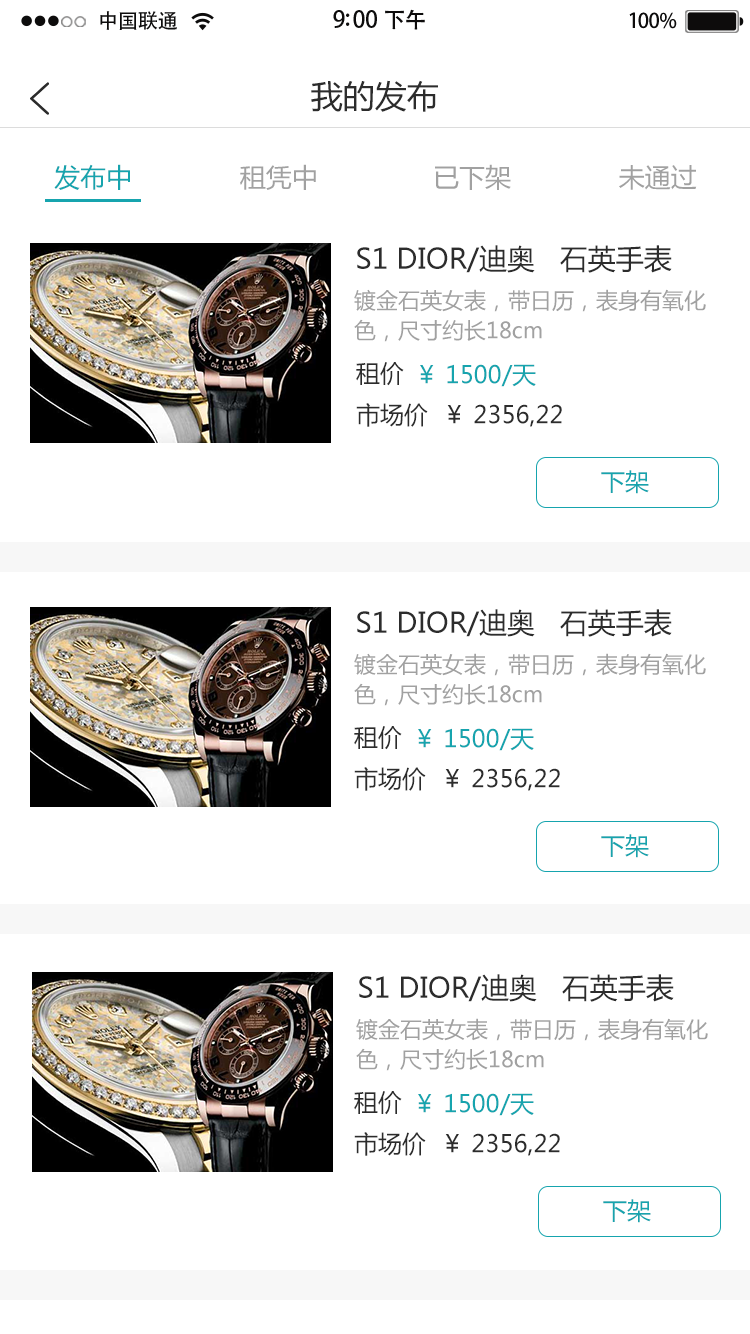
<style>
.page{position:relative;width:750px;height:1334px;background:#ffffff}
.page>*{position:absolute;margin:0}
.t1{font:20.4px "AdobeHeitiStd-Regular";letter-spacing:-0.02em;color:#000000}
.t2{font:23px "AdobeHeitiStd-Regular";letter-spacing:-0.02em;color:#000000}
.t3{font:22px "AdobeHeitiStd-Regular";letter-spacing:-0.02em;color:#000000}
.t4{font:20.4px "AdobeHeitiStd-Regular";letter-spacing:-0.02em;color:#010101}
.t5{font:32px "MicrosoftYaHei";color:#2c2c2c}
.t6{font:26px "MicrosoftYaHei";color:#a1a1a1}
.t7{font:26px "MicrosoftYaHei";color:#16a4ae}
.t8{font:28px "MicrosoftYaHei";color:#2c2c2c}
.t9{font:22px/15px "MicrosoftYaHei";color:#a1a1a1}
.t10{font:24px "MicrosoftYaHei";color:#2c2c2c}
.t11{font:24px "MicrosoftYaHei";color:#16a4ae}
</style>
<div class="page">
<p class="t1" style="left:100px;top:11px;width:77px;height:19px">中国联通</p>
<p class="t2" style="left:333px;top:9px;width:92px;height:21px">9:00 <span class="t3">下午</span></p>
<p class="t4" style="left:629px;top:12px;width:48px;height:17px">100%</p>
<p class="t5" style="left:311px;top:80px;width:127px;height:32px">我的发布</p>
<p class="t6" style="left:54px;top:164px;width:643px;height:26px"><span class="t7">发布中              </span>租凭中               已下架              未通过</p>
<p class="t8" style="left:357px;top:245px;width:315px;height:28px">S1 DIOR/迪奥   石英手表</p>
<p class="t9" style="left:354px;top:289px;width:352px;height:53px">镀金石英女表，带日历，表身有氧化<br><br>色，尺寸约长18cm</p>
<p class="t10" style="left:356px;top:362px;width:48px;height:24px">租价</p>
<p class="t11" style="left:420px;top:364px;width:116px;height:23px">￥ 1500/天</p>
<p class="t10" style="left:356px;top:403px;width:206px;height:24px">市场价  ￥ 2356,22</p>
<p class="t11" style="left:601px;top:470px;width:48px;height:24px">下架</p>
<p class="t8" style="left:357px;top:609px;width:315px;height:28px">S1 DIOR/迪奥   石英手表</p>
<p class="t9" style="left:354px;top:653px;width:352px;height:53px">镀金石英女表，带日历，表身有氧化<br><br>色，尺寸约长18cm</p>
<p class="t10" style="left:354px;top:726px;width:48px;height:24px">租价</p>
<p class="t11" style="left:418px;top:728px;width:116px;height:23px">￥ 1500/天</p>
<p class="t10" style="left:354px;top:767px;width:206px;height:24px">市场价  ￥ 2356,22</p>
<p class="t11" style="left:601px;top:834px;width:48px;height:24px">下架</p>
<p class="t8" style="left:359px;top:974px;width:315px;height:28px">S1 DIOR/迪奥   石英手表</p>
<p class="t9" style="left:356px;top:1018px;width:352px;height:53px">镀金石英女表，带日历，表身有氧化<br><br>色，尺寸约长18cm</p>
<p class="t10" style="left:354px;top:1091px;width:48px;height:24px">租价</p>
<p class="t11" style="left:418px;top:1093px;width:116px;height:23px">￥ 1500/天</p>
<p class="t10" style="left:354px;top:1132px;width:206px;height:24px">市场价  ￥ 2356,22</p>
<p class="t11" style="left:603px;top:1199px;width:48px;height:24px">下架</p>
</div>
